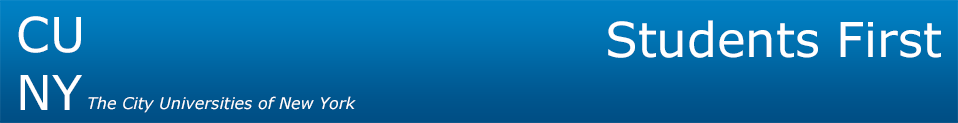
<style>
.page{position:relative;width:958px;height:123px}
.page>*{position:absolute;margin:0}
.t1{font:48px "Verdana";color:#ffffff}
.t2{font:16px "Verdana-Italic";color:#ffffff}
</style>
<div class="page">
<p class="t1" style="left:18px;top:16px;width:64px;height:94px">CU<br>NY</p>
<p class="t1" style="left:608px;top:20px;width:333px;height:38px">Students First</p>
<p class="t2" style="left:88px;top:96px;width:268px;height:17px">The City Universities of New York</p>
</div>
